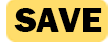
<style>
.page{position:relative;width:108px;height:43px;background:#ffdd6b}
.page>*{position:absolute;margin:0}
.t1{font:36px "FranklinGothic-Heavy";color:#000000}
</style>
<div class="page">
<p class="t1" style="left:14px;top:8px;width:88px;height:24px">SAVE</p>
</div>
